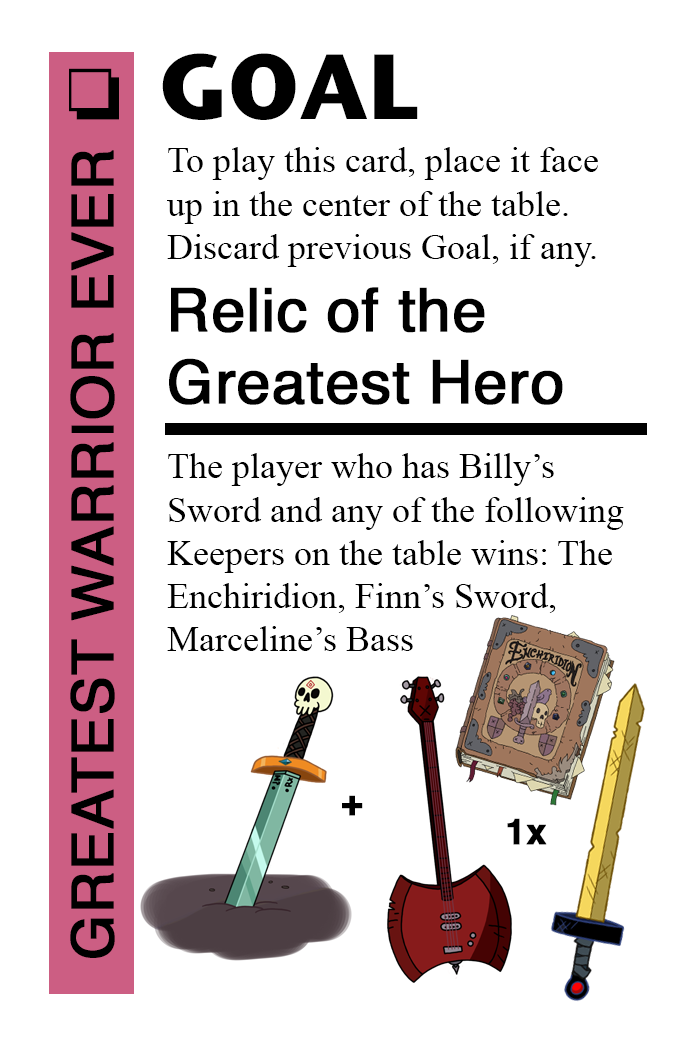
<style>
.page{position:relative;width:700px;height:1042px;background:#ffffff}
.page>*{position:absolute;margin:0}
.t1{font:92px "StoneSansITC-Bold";color:#000000}
.t2{font:72px "MS-Gothic";color:#000000}
.t3{font:58px "Helvetica";color:#000000;font-weight:bold}
.t4{font:36px "TimesNewRomanPSMT";color:#000000}
.t5{font:60px "Helvetica";color:#000000;font-weight:bold}
.t6{font:36px "Helvetica-Bold";color:#000000;font-weight:bold}
</style>
<div class="page">
<p class="t1" style="left:162px;top:53px;width:256px;height:67px">GOAL</p>
<p class="t2" style="left:69px;top:68px;width:50px;height:52px">❏</p>
<p class="t3" style="left:70px;top:150px;width:45px;height:808px;rotate:-90deg">GREATEST WARRIOR EVER</p>
<p class="t4" style="left:167px;top:147px;width:431px;height:120px">To play this card, place it face<br>up in the center of the table.<br>Discard previous Goal, if any.</p>
<p class="t5" style="left:169px;top:287px;width:394px;height:118px">Relic of the <br>Greatest Hero</p>
<p class="t4" style="left:167px;top:453px;width:457px;height:198px">The player who has Billy’s <br>Sword and any of the following <br>Keepers on the table wins: The <br>Enchiridion, Finn’s Sword, <br>Marceline’s Bass</p>
<p class="t6" style="left:342px;top:795px;width:21px;height:21px">+</p>
<p class="t6" style="left:507px;top:818px;width:40px;height:27px">1x</p>
</div>
